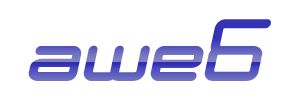
<style>
.page{position:relative;width:300px;height:100px;background:#ffffff}
.page>*{position:absolute;margin:0}
.t1{font:100px "PhutureODCBlackOblique"}
</style>
<div class="page">
<p class="t1" style="left:28px;top:19px;width:243px;height:62px">awe6</p>
</div>
